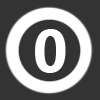
<style>
.page{position:relative;width:100px;height:100px;background:#333333}
.page>*{position:absolute;margin:0}
.t1{font:60px "SegoeUI-Bold";letter-spacing:-0.105em;color:#ffffff}
</style>
<div class="page">
<p class="t1" style="left:35px;top:29px;width:31px;height:44px">0</p>
</div>
